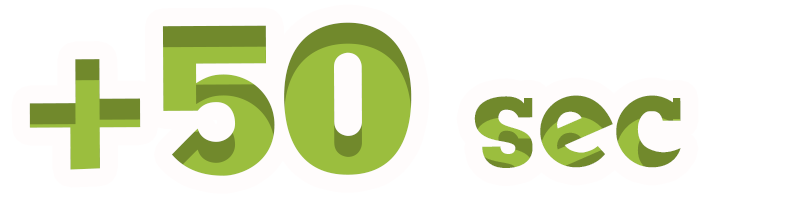
<style>
.page{position:relative;width:806px;height:198px;background:#ffffff}
.page>*{position:absolute;margin:0}
.t1{font:204.1px "BadTyp-Regular";color:#9bbe3e}
.t2{font:95.6px "BadTyp-Regular"}
</style>
<div class="page">
<p class="t1" style="left:29px;top:22px;width:383px;height:154px">+50</p>
<p class="t2" style="left:474px;top:95px;width:207px;height:73px">sec</p>
</div>
